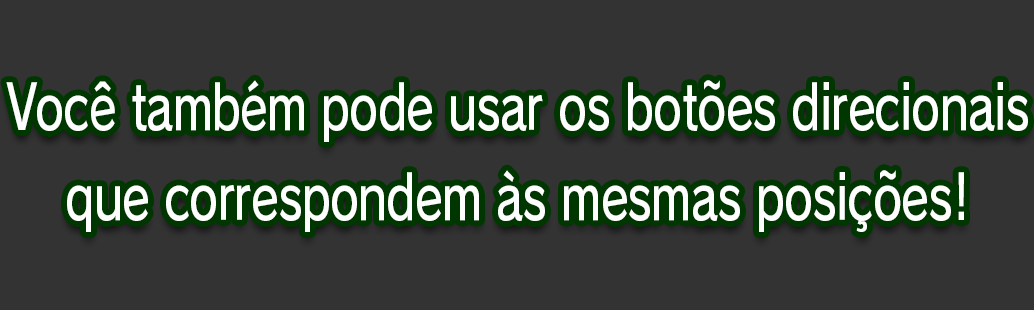
<style>
.page{position:relative;width:1034px;height:310px;background:#333333}
.page>*{position:absolute;margin:0}
.t1{font:61.3px/90.7px "RodinPro-DB";letter-spacing:-0.022em;color:#fefefe;scale:0.75 1}
</style>
<div class="page">
<p class="t1" style="left:6px;top:80px;width:1022px;height:152px;text-align:center">Você também pode usar os botões direcionais<br>que correspondem às mesmas posições!</p>
</div>
